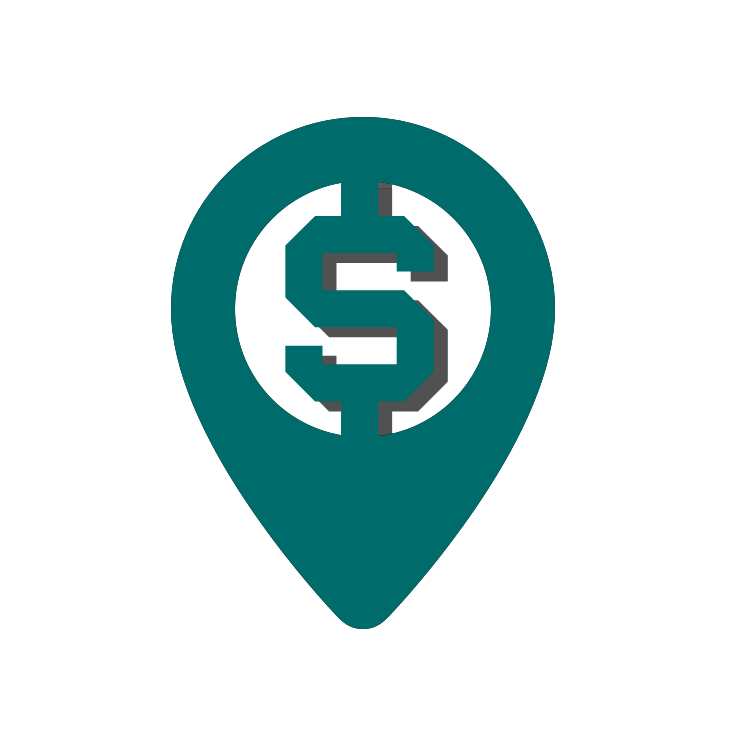
<style>
.page{position:relative;width:745px;height:747px;background:#ffffff}
.page>*{position:absolute;margin:0}
.t1{font:380px "College";color:#006b6b}
</style>
<div class="page">
<p class="t1" style="left:285px;top:178px;width:149px;height:261px">$</p>
</div>
